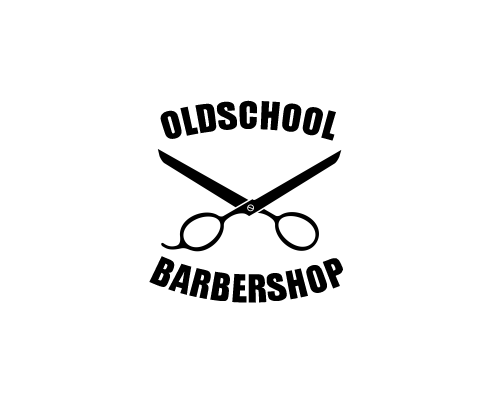
<style>
.page{position:relative;width:500px;height:400px;background:#ffffff}
.page>*{position:absolute;margin:0}
.t1{font:36px "Impact";letter-spacing:-0.025em;color:#000000;text-transform:uppercase;scale:0.67 1}
</style>
<div class="page">
<p class="t1" style="left:160px;top:100px;width:176px;height:41px">Oldschool</p>
<p class="t1" style="left:149px;top:256px;width:194px;height:47px">Barbershop</p>
</div>
